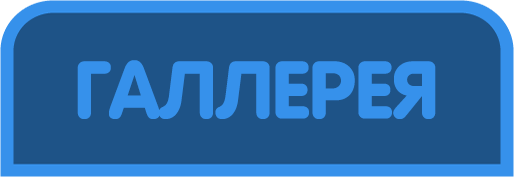
<style>
.page{position:relative;width:514px;height:177px;background:#1e5387}
.page>*{position:absolute;margin:0}
.t1{font:80px "VAGWorld-Bold";color:#3691eb}
</style>
<div class="page">
<p class="t1" style="left:77px;top:60px;width:359px;height:59px">ГАЛЛЕРЕЯ</p>
</div>
